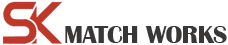
<style>
.page{position:relative;width:228px;height:45px;background:#ffffff}
.page>*{position:absolute;margin:0}
.t1{font:26px "BritannicBold";color:#3a3737}
</style>
<div class="page">
<p class="t1" style="left:65px;top:26px;width:162px;height:17px">MATCH WORKS</p>
</div>
